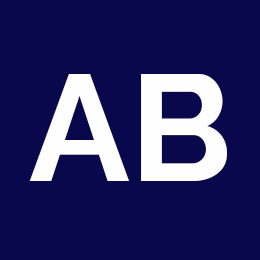
<style>
.page{position:relative;width:260px;height:260px;background:#0a084c}
.page>*{position:absolute;margin:0}
.t1{font:150px "Raleway-Bold";color:#fefefe}
</style>
<div class="page">
<p class="t1" style="left:29px;top:74px;width:198px;height:107px">AB</p>
</div>
